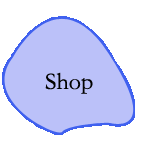
<style>
.page{position:relative;width:144px;height:144px;background:#bbc1f9}
.page>*{position:absolute;margin:0}
.t1{font:24px "STFangsong";color:#020200}
</style>
<div class="page">
<p class="t1" style="left:45px;top:72px;width:48px;height:22px">Shop</p>
</div>
